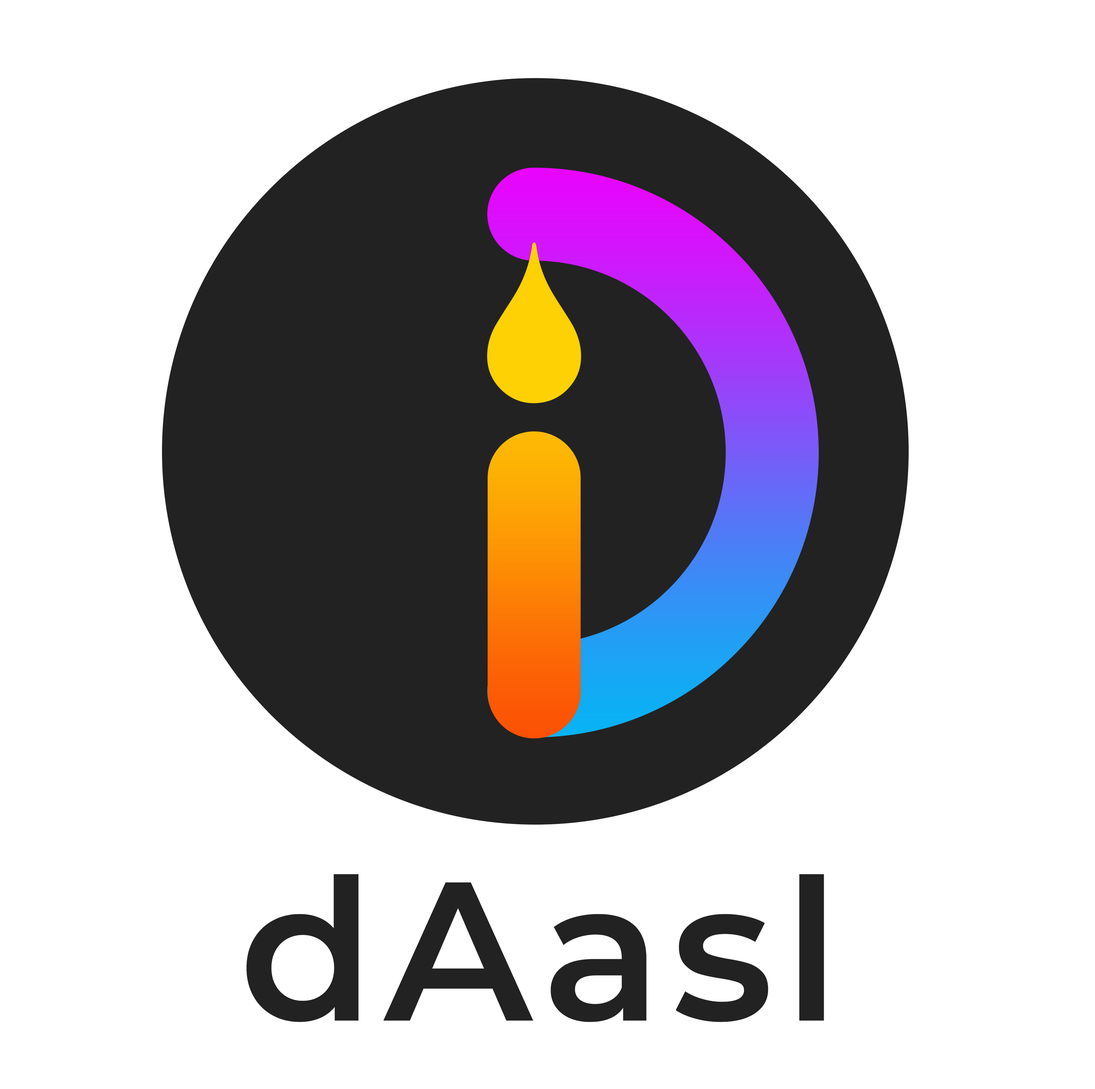
<style>
.page{position:relative;width:1095px;height:1089px;background:#ffffff}
.page>*{position:absolute;margin:0}
.t1{font:197.2px "Montserrat-SemiBold";letter-spacing:0.05em;color:#222222}
</style>
<div class="page">
<p class="t1" style="left:246px;top:874px;width:578px;height:148px">dAasl</p>
</div>
